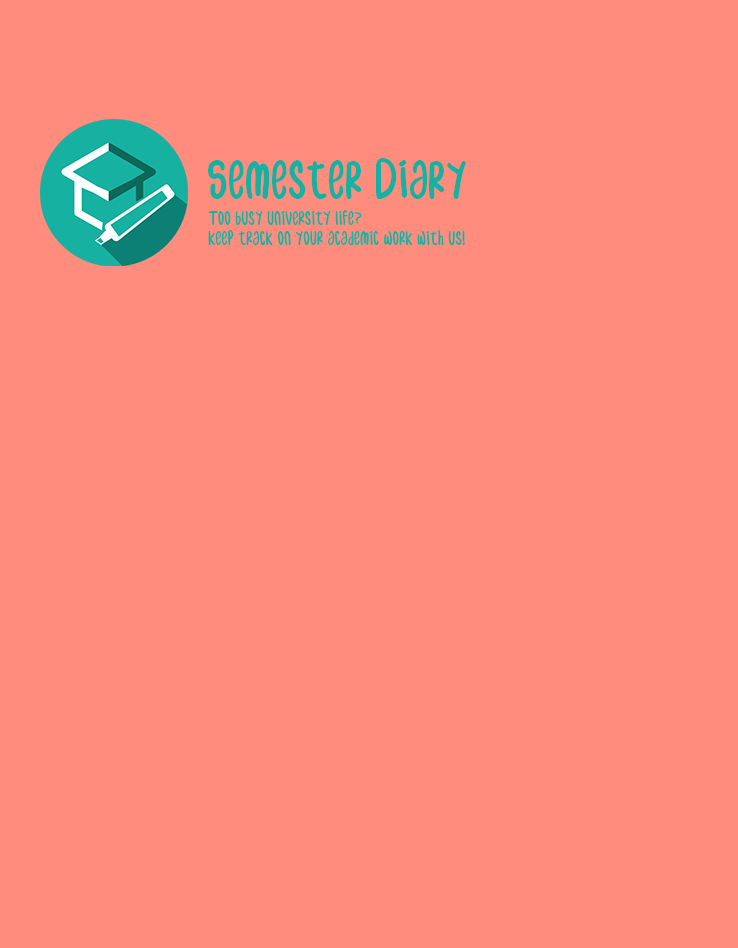
<style>
.page{position:relative;width:738px;height:948px;background:#ff8c7d}
.page>*{position:absolute;margin:0}
.t1{font:50px "samble";color:#17b1a1}
.t2{font:18px/20px "samble";color:#17b1a1}
</style>
<div class="page">
<p class="t1" style="left:208px;top:158px;width:258px;height:41px">Semester Diary</p>
<p class="t2" style="left:208px;top:210px;width:257px;height:35px">Too busy university life?<br>keep track on your academic work with us!</p>
</div>
